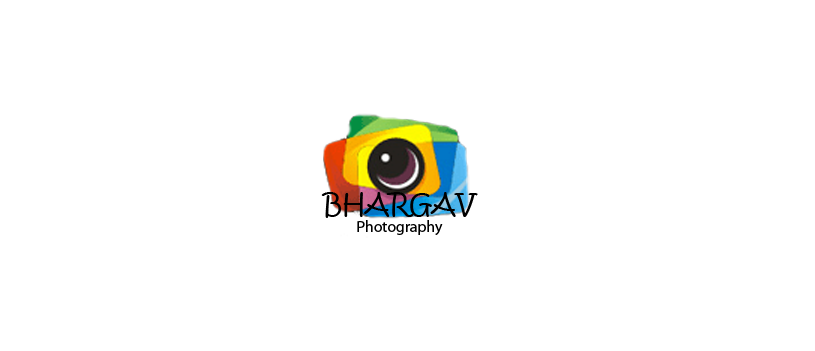
<style>
.page{position:relative;width:815px;height:351px;background:#ffffff}
.page>*{position:absolute;margin:0}
.t1{font:15.8px "MyriadPro-Regular";color:#000000}
.t2{font:27px "KristenITC-Regular";color:#000000}
</style>
<div class="page">
<p class="t1" style="left:321px;top:192px;width:157px;height:43px;text-align:center"><span class="t2">BHARGAV<br></span>Photography</p>
</div>
